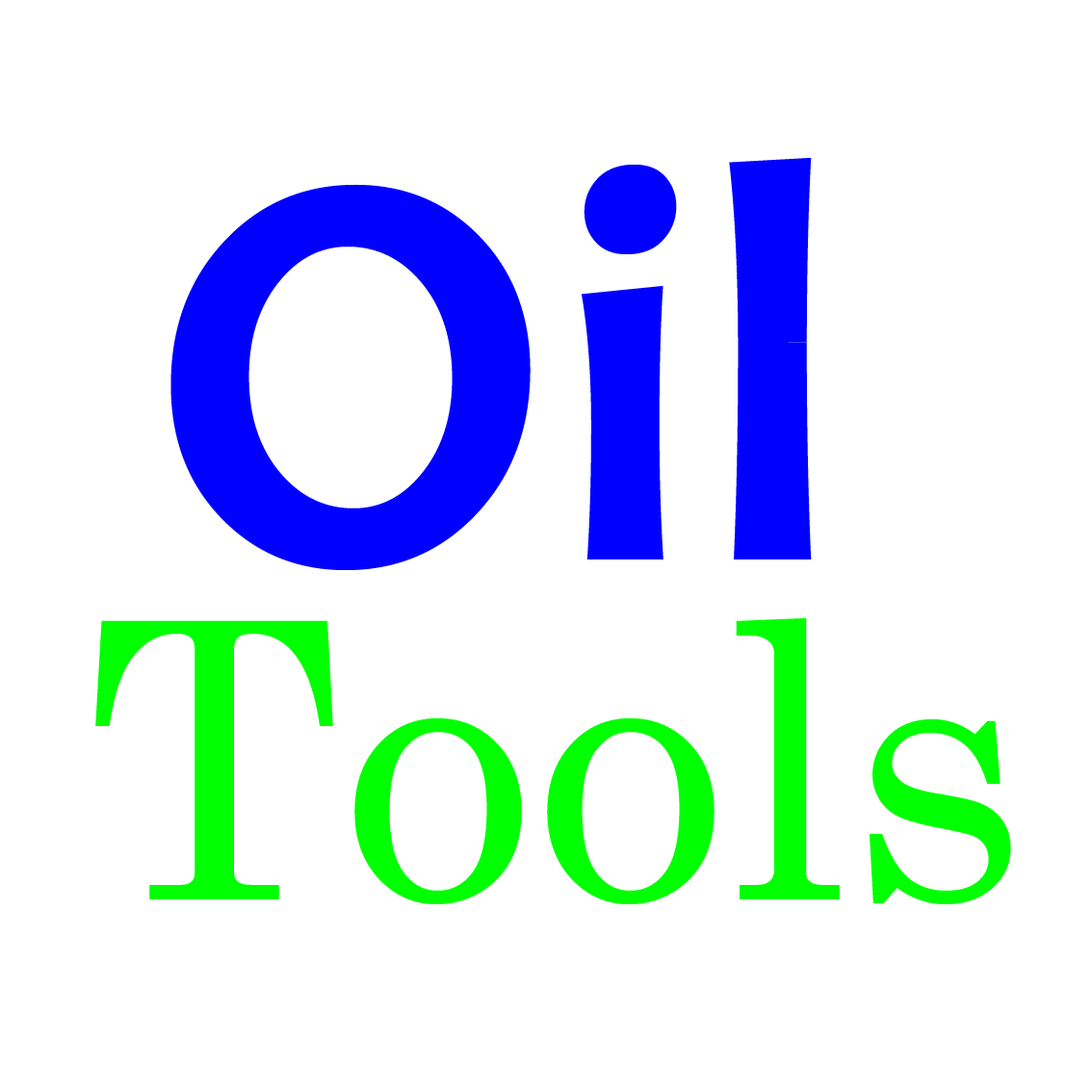
<style>
.page{position:relative;width:1092px;height:1092px;background:#ffffff}
.page>*{position:absolute;margin:0}
.t1{font:577.8px "Candara-Bold";color:#0000ff}
.t2{font:385.2px "Century";color:#00ff00}
</style>
<div class="page">
<p class="t1" style="left:170px;top:157px;width:642px;height:413px">Oil</p>
<p class="t2" style="left:95px;top:617px;width:916px;height:287px">Tools</p>
</div>
